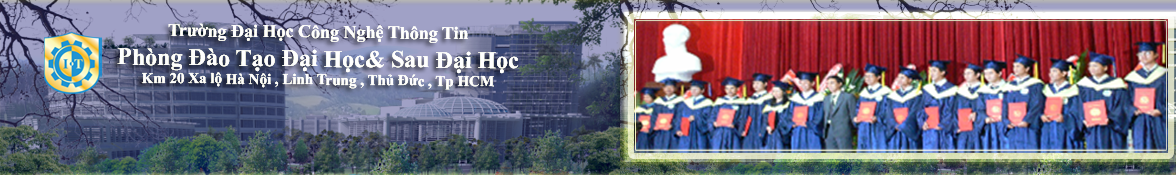
<style>
.page{position:relative;width:1176px;height:175px}
.page>*{position:absolute;margin:0}
.t1{font:15px "TimesNewRomanPS-BoldMT";color:#ffffff}
.t2{font:18px "TimesNewRomanPS-BoldMT";color:#ffffff}
.t3{font:24px "TimesNewRomanPS-BoldMT";color:#ffffff}
</style>
<div class="page">
<p class="t1" style="left:117px;top:23px;width:402px;height:67px;text-align:center;rotate:1deg"><span class="t2">Trường Đại Học Công Nghệ Thông Tin<br></span><span class="t3">Phòng Đào Tạo Đại Học&amp; Sau Đại Học<br></span>Km 20 Xa lộ Hà Nội , Linh Trung , Thủ Đức , Tp HCM</p>
</div>
